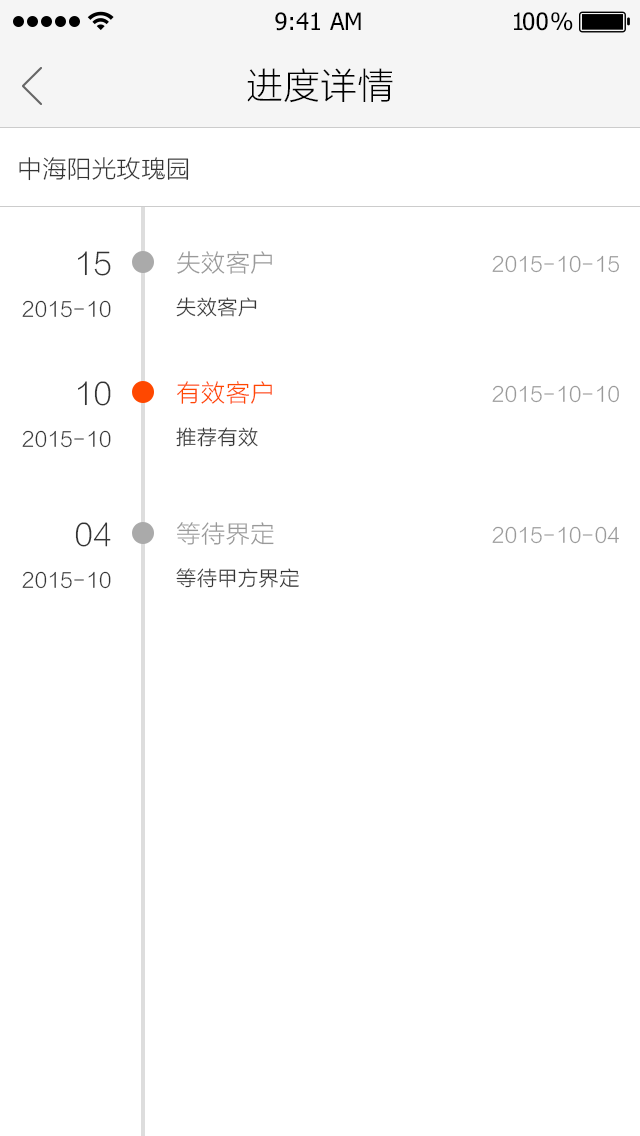
<style>
.page{position:relative;width:640px;height:1136px;background:#ffffff}
.page>*{position:absolute;margin:0}
.t1{font:24px "Tahoma";color:#000000}
.t2{font:24px "Tahoma";letter-spacing:-0.1em;color:#000000}
.t3{font:24px "Tahoma";letter-spacing:-0.25em;color:#000000}
.t4{font:36px "STHeitiSC-Light";color:#000000}
.t5{font:24px "STHeitiSC-Light";color:#333333}
.t6{font:30px "STHeitiSC-Light";color:#333333}
.t7{font:24px "STHeitiSC-Light";color:#999999}
.t8{font:20px "STHeitiSC-Light";color:#999999}
.t9{font:20px "STHeitiSC-Light";color:#333333}
.t10{font:24px "STHeitiSC-Light";color:#ff4800}
</style>
<div class="page">
<p class="t1" style="left:275px;top:12px;width:86px;height:19px">9:41 AM</p>
<p class="t2" style="left:514px;top:12px;width:59px;height:19px">1<span class="t1">0</span><span class="t3">0 </span>%</p>
<p class="t4" style="left:247px;top:68px;width:146px;height:35px">进度详情</p>
<p class="t5" style="left:19px;top:157px;width:170px;height:24px">中海阳光玫瑰园</p>
<p class="t6" style="left:78px;top:251px;width:33px;height:25px">15</p>
<p class="t7" style="left:177px;top:251px;width:95px;height:23px">失效客户</p>
<p class="t8" style="left:492px;top:255px;width:127px;height:18px">2015-10-15</p>
<p class="t9" style="left:22px;top:300px;width:89px;height:18px">2015-10</p>
<p class="t9" style="left:176px;top:297px;width:81px;height:20px">失效客户</p>
<p class="t6" style="left:78px;top:381px;width:33px;height:25px">10</p>
<p class="t10" style="left:177px;top:381px;width:95px;height:23px">有效客户</p>
<p class="t8" style="left:492px;top:385px;width:127px;height:18px">2015-10-10</p>
<p class="t9" style="left:22px;top:430px;width:89px;height:18px">2015-10</p>
<p class="t9" style="left:176px;top:427px;width:82px;height:20px">推荐有效</p>
<p class="t6" style="left:75px;top:522px;width:36px;height:25px">04</p>
<p class="t7" style="left:177px;top:522px;width:97px;height:23px">等待界定</p>
<p class="t8" style="left:492px;top:526px;width:127px;height:18px">2015-10-04</p>
<p class="t9" style="left:176px;top:568px;width:123px;height:20px">等待甲方界定</p>
<p class="t9" style="left:22px;top:571px;width:89px;height:18px">2015-10</p>
</div>
